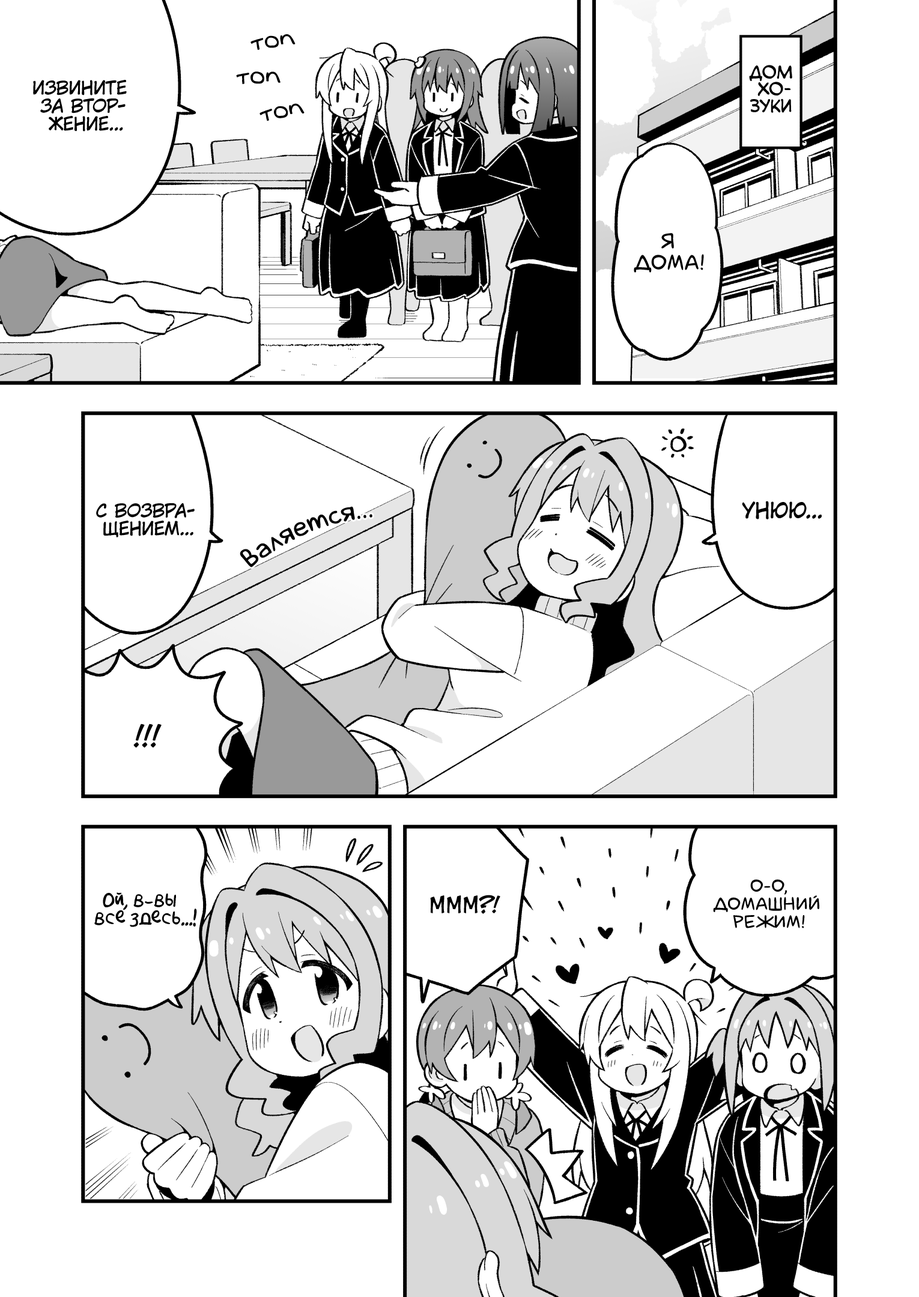
<style>
.page{position:relative;width:919px;height:1297px;background:#ffffff}
.page>*{position:absolute;margin:0}
.t1{font:21.6px "v_Augie";color:#000000;font-weight:bold}
.t2{font:16.8px "v_CCMonologous";color:#000000;text-transform:uppercase}
.t3{font:18px "KuraiVoice2";color:#000000;text-transform:uppercase}
.t4{font:21.6px "laCartoonerie";color:#000000;text-transform:uppercase}
.t5{font:25.2px "laCartoonerie";color:#000000}
.t6{font:21.6px "KuraiVoice2";color:#000000;text-transform:uppercase}
.t7{font:28.8px "v_CCJeffCampbell";color:#000000;text-transform:uppercase}
.t8{font:18px "laCartoonerie";color:#000000;text-transform:uppercase}
.t9{font:18px "AkbarPlain";color:#000000}
.t10{font:21.6px "v_CCJeffCampbell";color:#000000;text-transform:uppercase}
</style>
<div class="page">
<p class="t1" style="left:250px;top:34px;width:46px;height:16px;rotate:-8deg">топ</p>
<p class="t2" style="left:749px;top:65px;width:43px;height:48px;text-align:center">Дом<br>Хо-<br>зуки</p>
<p class="t1" style="left:236px;top:71px;width:45px;height:13px;rotate:-2deg">топ</p>
<p class="t3" style="left:33px;top:80px;width:94px;height:52px;text-align:center">Извините<br>за втор-<br>жение...</p>
<p class="t1" style="left:259px;top:103px;width:46px;height:18px;rotate:-11deg">топ</p>
<p class="t4" style="left:634px;top:233px;width:70px;height:40px;text-align:center">Я<br>дома!</p>
<p class="t3" style="left:96px;top:503px;width:99px;height:35px;text-align:center">С возвра-<br>щением...</p>
<p class="t5" style="left:240px;top:506px;width:132px;height:62px;rotate:-23deg">валяется...</p>
<p class="t6" style="left:742px;top:501px;width:80px;height:19px">Унюю...</p>
<p class="t7" style="left:133px;top:724px;width:29px;height:24px">!!!</p>
<p class="t8" style="left:713px;top:879px;width:106px;height:50px;text-align:center">О-о,<br>домашний<br>режим!</p>
<p class="t9" style="left:94px;top:893px;width:103px;height:34px;text-align:center">Ой, в-вы<br>все здесь...!</p>
<p class="t10" style="left:430px;top:895px;width:70px;height:19px">Ммм?!</p>
</div>
